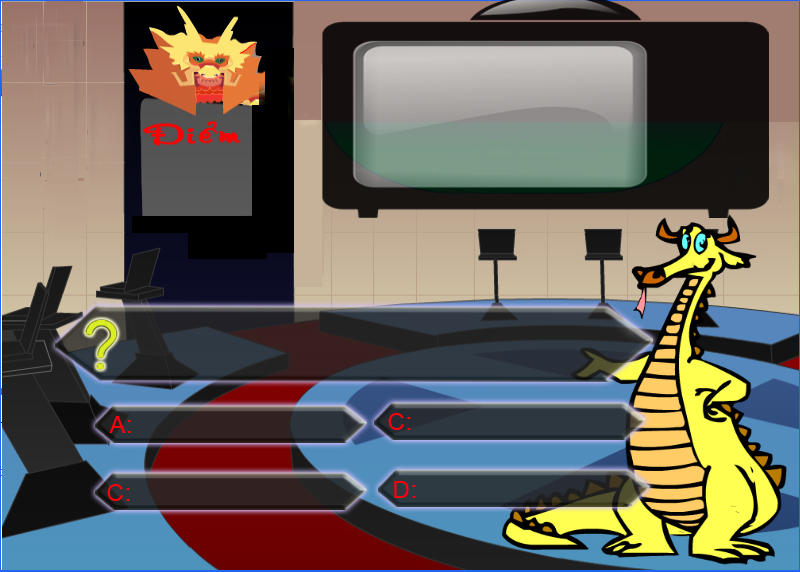
<style>
.page{position:relative;width:800px;height:572px}
.page>*{position:absolute;margin:0}
.t1{font:24px "ArialMT";letter-spacing:0.025em;color:#fc000c}
</style>
<div class="page">
<p class="t1" style="left:388px;top:413px;width:23px;height:17px">C:</p>
<p class="t1" style="left:109px;top:416px;width:22px;height:17px">A:</p>
<p class="t1" style="left:107px;top:484px;width:23px;height:17px">C:</p>
<p class="t1" style="left:394px;top:481px;width:22px;height:17px">D:</p>
</div>
